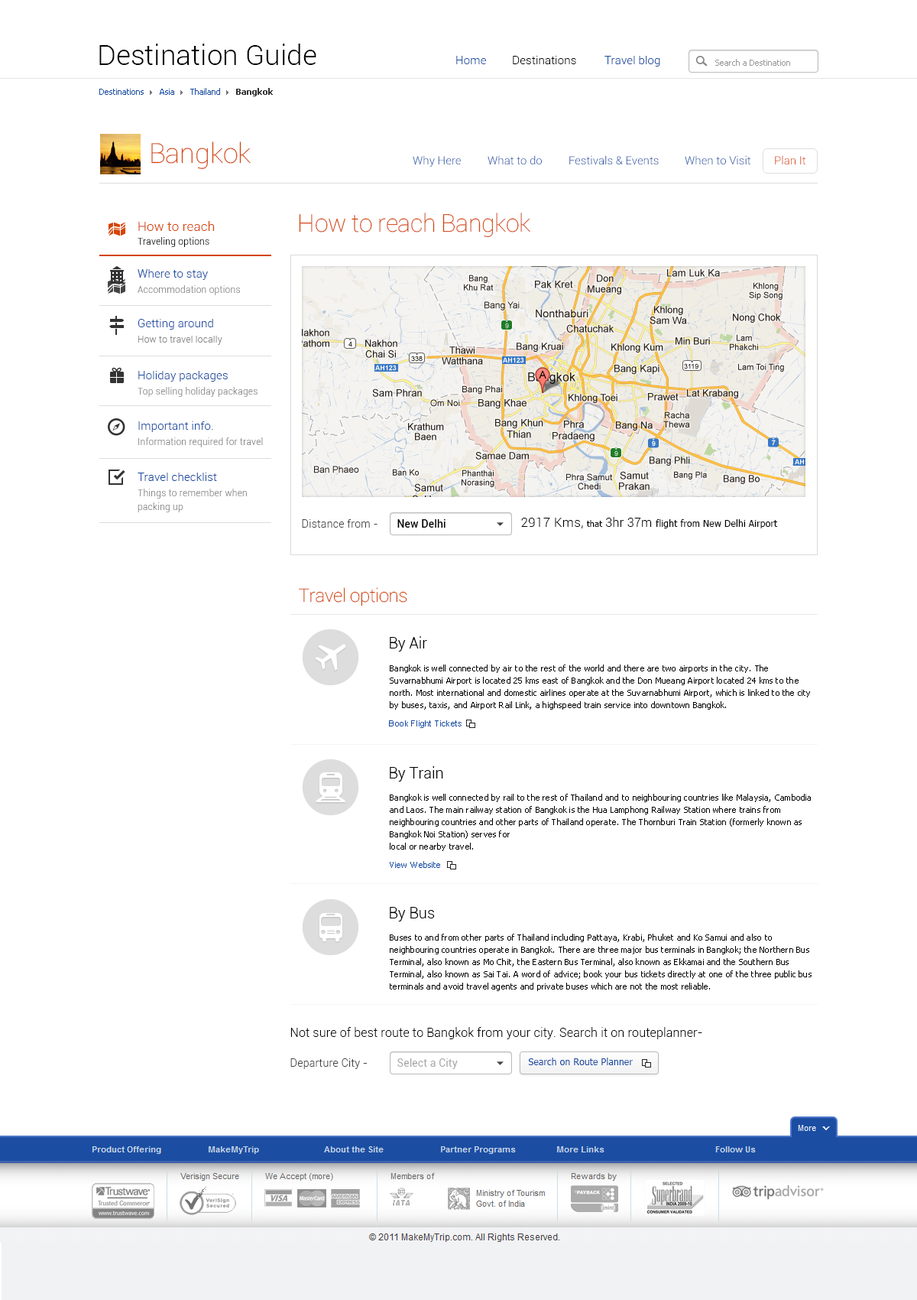
<style>
.page{position:relative;width:917px;height:1300px;background:#ffffff}
.page>*{position:absolute;margin:0}
.t1{font:28.3px "Roboto-Light";color:#000000}
.t2{font:11.5px "Roboto-Light";letter-spacing:0.01em;color:#1a4da2}
.t3{font:11.5px "Roboto-Light";letter-spacing:0.01em;color:#000000}
.t4{font:8.4px "Tahoma";color:#989898}
.t5{font:8.4px "Tahoma";color:#1a4da2}
.t6{font:8.4px "Webdings";color:#777777}
.t7{font:8.4px "Tahoma-Bold";color:#333333}
.t8{font:27.5px "Roboto-Thin";color:#d54405}
.t9{font:11.5px "Roboto-Light";color:#1a4da2}
.t10{font:11.5px "Roboto-Light";color:#d54405}
.t11{font:13px "Roboto-Light";letter-spacing:0.01em;color:#d54405}
.t12{font:24.5px "Roboto-Thin";letter-spacing:-0.01em;color:#d54405}
.t13{font:9.2px "Roboto-Light";letter-spacing:0.02em;color:#000000}
.t14{font:9.2px "Roboto-Light";letter-spacing:0.02em;color:#878787}
.t15{font:9.2px/13.8px "Roboto-Light";letter-spacing:0.02em;color:#878787}
.t16{font:10.7px "Roboto-Light";letter-spacing:0.02em;color:#444444}
.t17{font:10.7px "Roboto-Medium";letter-spacing:0.01em;color:#000000}
.t18{font:9.2px "Tahoma";letter-spacing:0.02em;color:#000000}
.t19{font:13px "Roboto-Light";letter-spacing:0.02em;color:#000000}
.t20{font:8.4px "Tahoma";letter-spacing:0.02em;color:#000000}
.t21{font:12.2px "Roboto-Light";letter-spacing:0.02em;color:#000000}
.t22{font:18.3px "Roboto-Thin";letter-spacing:-0.01em;color:#d54405}
.t23{font:15.3px "Roboto-Light";color:#000000}
.t24{font:8.4px/12.2px "Tahoma";letter-spacing:0.02em;color:#000000}
.t25{font:8.4px "ArialMT";letter-spacing:0.02em;color:#1a4da2}
.t26{font:8.4px "Tahoma";letter-spacing:0.02em;color:#1a4da2}
.t27{font:12.2px "Roboto-Light";letter-spacing:0.01em;color:#000000}
.t28{font:10.7px "Roboto-Regular";letter-spacing:0.01em;color:#aaaaaa}
.t29{font:9.2px "Tahoma";letter-spacing:0.02em;color:#1a4da2}
</style>
<div class="page">
<p class="t1" style="left:99px;top:44px;width:218px;height:21px">Destination Guide</p>
<p class="t2" style="left:456px;top:56px;width:30px;height:8px">Home</p>
<p class="t3" style="left:513px;top:56px;width:63px;height:8px">Destinations</p>
<p class="t2" style="left:605px;top:56px;width:56px;height:11px">Travel blog</p>
<p class="t4" style="left:716px;top:59px;width:75px;height:7px">Search a Destination</p>
<p class="t5" style="left:99px;top:88px;width:174px;height:8px">Destinations <span class="t6">4 </span>Asia <span class="t6">4 </span>Thailand <span class="t6">4 </span><span class="t7">Bangkok</span></p>
<p class="t8" style="left:151px;top:141px;width:100px;height:28px">Bangkok</p>
<p class="t9" style="left:413px;top:155px;width:48px;height:12px">Why Here</p>
<p class="t9" style="left:488px;top:155px;width:54px;height:10px">What to do</p>
<p class="t9" style="left:570px;top:155px;width:89px;height:10px">Festivals &amp; Events</p>
<p class="t9" style="left:685px;top:155px;width:66px;height:9px">When to Visit</p>
<p class="t10" style="left:775px;top:155px;width:31px;height:10px">Plan It</p>
<p class="t11" style="left:138px;top:221px;width:77px;height:10px">How to reach</p>
<p class="t12" style="left:299px;top:213px;width:232px;height:24px">How to reach Bangkok</p>
<p class="t13" style="left:138px;top:237px;width:71px;height:10px">Traveling options</p>
<p class="t2" style="left:138px;top:269px;width:70px;height:11px">Where to stay</p>
<p class="t14" style="left:138px;top:285px;width:102px;height:10px">Accommodation options</p>
<p class="t2" style="left:138px;top:319px;width:75px;height:11px">Getting around</p>
<p class="t14" style="left:138px;top:336px;width:84px;height:9px">How to travel locally</p>
<p class="t2" style="left:138px;top:371px;width:90px;height:11px">Holiday packages</p>
<p class="t14" style="left:138px;top:387px;width:120px;height:10px">Top selling holiday packages</p>
<p class="t2" style="left:138px;top:421px;width:75px;height:11px">Important info.</p>
<p class="t14" style="left:138px;top:437px;width:125px;height:10px">Information required for travel</p>
<p class="t2" style="left:138px;top:472px;width:79px;height:9px">Travel checklist</p>
<p class="t15" style="left:138px;top:489px;width:109px;height:23px">Things to remember when <br>packing up</p>
<p class="t16" style="left:302px;top:519px;width:76px;height:9px">Distance from -</p>
<p class="t17" style="left:398px;top:519px;width:48px;height:9px">New Delhi</p>
<p class="t18" style="left:521px;top:517px;width:257px;height:11px"><span class="t19">2917 Kms, </span><span class="t20">that </span><span class="t21">3hr 37m </span>flight from New Delhi Airport</p>
<p class="t22" style="left:299px;top:587px;width:109px;height:19px">Travel options</p>
<p class="t23" style="left:390px;top:636px;width:37px;height:15px">By Air</p>
<p class="t24" style="left:390px;top:664px;width:420px;height:45px">Bangkok is well connected by air to the rest of the world and there are two airports in the city. The Suvarnabhumi Airport is located 25 kms east of Bangkok and the Don Mueang Airport located 24 kms to the north. Most international and domestic airlines operate at the Suvarnabhumi Airport, which is linked to the city by buses, taxis, and Airport Rail Link, a highspeed train service into downtown Bangkok.</p>
<p class="t25" style="left:389px;top:720px;width:73px;height:8px">Book Flight Tickets</p>
<p class="t23" style="left:390px;top:766px;width:53px;height:15px">By Train</p>
<p class="t24" style="left:390px;top:794px;width:421px;height:57px">Bangkok is well connected by rail to the rest of Thailand and to neighbouring countries like Malaysia, Cambodia and Laos. The main railway station of Bangkok is the Hua Lamphong Railway Station where trains from neighbouring countries and other parts of Thailand operate. The Thornburi Train Station (formerly known as Bangkok Noi Station) serves for<br>local or nearby travel.</p>
<p class="t26" style="left:390px;top:861px;width:50px;height:7px">View Website</p>
<p class="t23" style="left:390px;top:907px;width:45px;height:14px">By Bus</p>
<p class="t24" style="left:390px;top:934px;width:422px;height:57px">Buses to and from other parts of Thailand including Pattaya, Krabi, Phuket and Ko Samui and also to neighbouring countries operate in Bangkok. There are three major bus terminals in Bangkok; the Northern Bus Terminal, also known as Mo Chit, the Eastern Bus Terminal, also known as Ekkamai and the Southern Bus Terminal, also known as Sai Tai. A word of advice; book your bus tickets directly at one of the three public bus terminals and avoid travel agents and private buses which are not the most reliable.</p>
<p class="t27" style="left:291px;top:1027px;width:412px;height:12px">Not sure of best route to Bangkok from your city. Search it on routeplanner-</p>
<p class="t16" style="left:291px;top:1058px;width:76px;height:11px">Departure City -</p>
<p class="t28" style="left:398px;top:1058px;width:60px;height:11px">Select a City</p>
<p class="t29" style="left:528px;top:1057px;width:105px;height:8px">Search on Route Planner</p>
</div>
